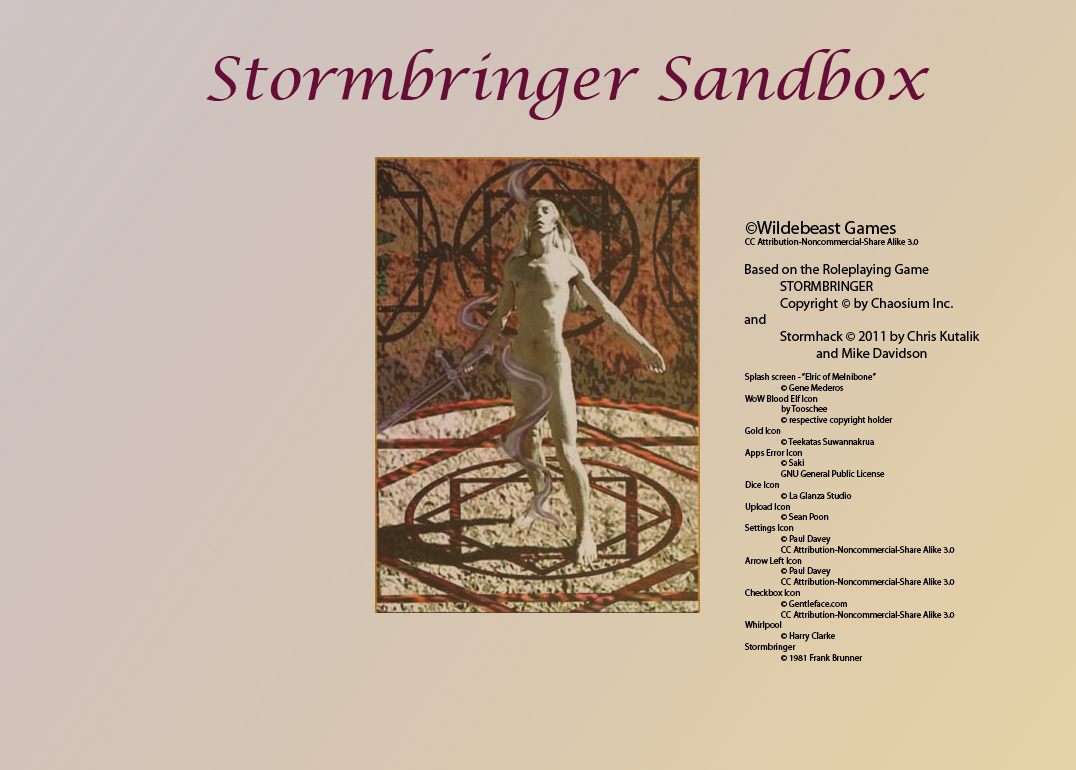
<style>
.page{position:relative;width:1076px;height:770px}
.page>*{position:absolute;margin:0}
.t1{font:60px "LucidaCalligraphy-Italic";color:#660e37}
.t2{font:9px "MyriadPro-Regular";color:#000000}
.t3{font:18px "MyriadPro-Regular";color:#000000}
.t4{font:14px "MyriadPro-Regular";color:#000000}
</style>
<div class="page">
<p class="t1" style="left:206px;top:49px;width:724px;height:71px">Stormbringer Sandbox</p>
<p class="t2" style="left:745px;top:221px;width:174px;height:24px"><span class="t3">©Wildebeast Games<br></span>CC Attribution-Noncommercial-Share Alike 3.0</p>
<p class="t4" style="left:744px;top:264px;width:236px;height:94px">Based on the Roleplaying Game<br> STORMBRINGER<br> Copyright © by Chaosium Inc.<br>and<br> Stormhack © 2011 by Chris Kutalik<br>  and Mike Davidson</p>
<p class="t2" style="left:745px;top:373px;width:210px;height:288px">Splash screen - “Elric of Melnibone”<br> © Gene Mederos<br>WoW Blood Elf Icon<br> by Tooschee<br> © respective copyright holder<br>Gold Icon<br> © Teekatas Suwannakrua<br>Apps Error Icon<br> © Saki<br> GNU General Public License<br>Dice Icon<br> © La Glanza Studio<br>Upload Icon<br> © Sean Poon<br>Settings Icon<br> © Paul Davey<br> CC Attribution-Noncommercial-Share Alike 3.0<br>Arrow Left Icon<br> © Paul Davey<br> CC Attribution-Noncommercial-Share Alike 3.0<br>Checkbox Icon<br> © Gentleface.com<br> CC Attribution-Noncommercial-Share Alike 3.0<br>Whirlpool<br> © Harry Clarke<br>Stormbringer<br> © 1981 Frank Brunner</p>
</div>
